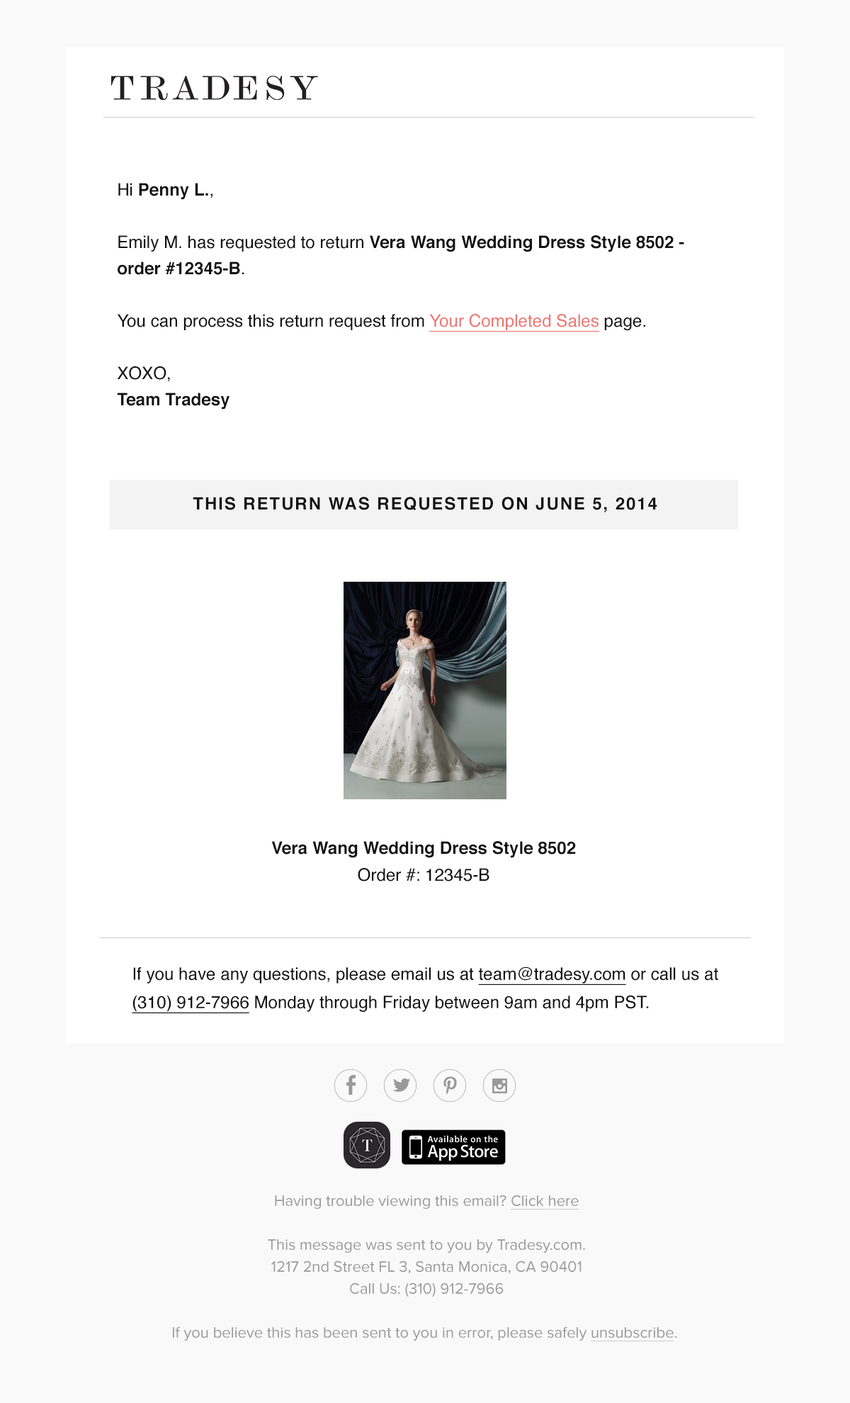
<style>
.page{position:relative;width:850px;height:1403px;background:#ffffff}
.page>*{position:absolute;margin:0}
.t1{font:17.1px/26.2px "Helvetica-Bold";color:#111111}
.t2{font:17.1px/26.2px "Helvetica";color:#111111}
.t3{font:17.1px/26.2px "Helvetica";color:#ee7873;text-decoration:underline}
.t4{font:17px "Helvetica-Bold";letter-spacing:0.08em;color:#111111;text-transform:uppercase}
.t5{font:17.1px "Helvetica-Bold";color:#111111}
.t6{font:17.1px "Helvetica";color:#111111}
.t7{font:17.1px/28.3px "Helvetica";color:#111111}
.t8{font:17.1px/28.3px "Helvetica";color:#111111;text-decoration:underline}
.t9{font:15.6px/22px "ProximaNova-Regular";color:#999999}
.t10{font:15.6px/22px "ProximaNova-Regular";color:#999999;text-decoration:underline}
</style>
<div class="page">
<p class="t1" style="left:117px;top:183px;width:567px;height:226px"><span class="t2">Hi </span>Penny L.<span class="t2">,<br><br>Emily M. has requested to return </span>Vera Wang Wedding Dress Style 8502 - order #12345-B<span class="t2">.<br><br>You can process this return request from </span><span class="t3">Your Completed Sales</span><span class="t2"> page.<br><br>XOXO,<br></span>Team Tradesy</p>
<p class="t4" style="left:193px;top:497px;width:464px;height:15px">This return was requested on june 5, 2014</p>
<p class="t5" style="left:271px;top:841px;width:305px;height:17px">Vera Wang Wedding Dress Style 8502</p>
<p class="t6" style="left:358px;top:868px;width:132px;height:13px">Order #: 12345-B</p>
<p class="t7" style="left:132px;top:966px;width:586px;height:47px">If you have any questions, please email us at <span class="t8">team@tradesy.com</span> or call us at <br><span class="t8">(310) 912-7966</span> Monday through Friday between 9am and 4pm PST.</p>
<p class="t9" style="left:173px;top:1194px;width:504px;height:147px;text-align:center">Having trouble viewing this email? <span class="t10">Click here<br></span><br>This message was sent to you by Tradesy.com.<br>1217 2nd Street FL 3, Santa Monica, CA 90401<br>Call Us: (310) 912-7966<br><br>If you believe this has been sent to you in error, please safely <span class="t10">unsubscribe</span>.</p>
</div>
